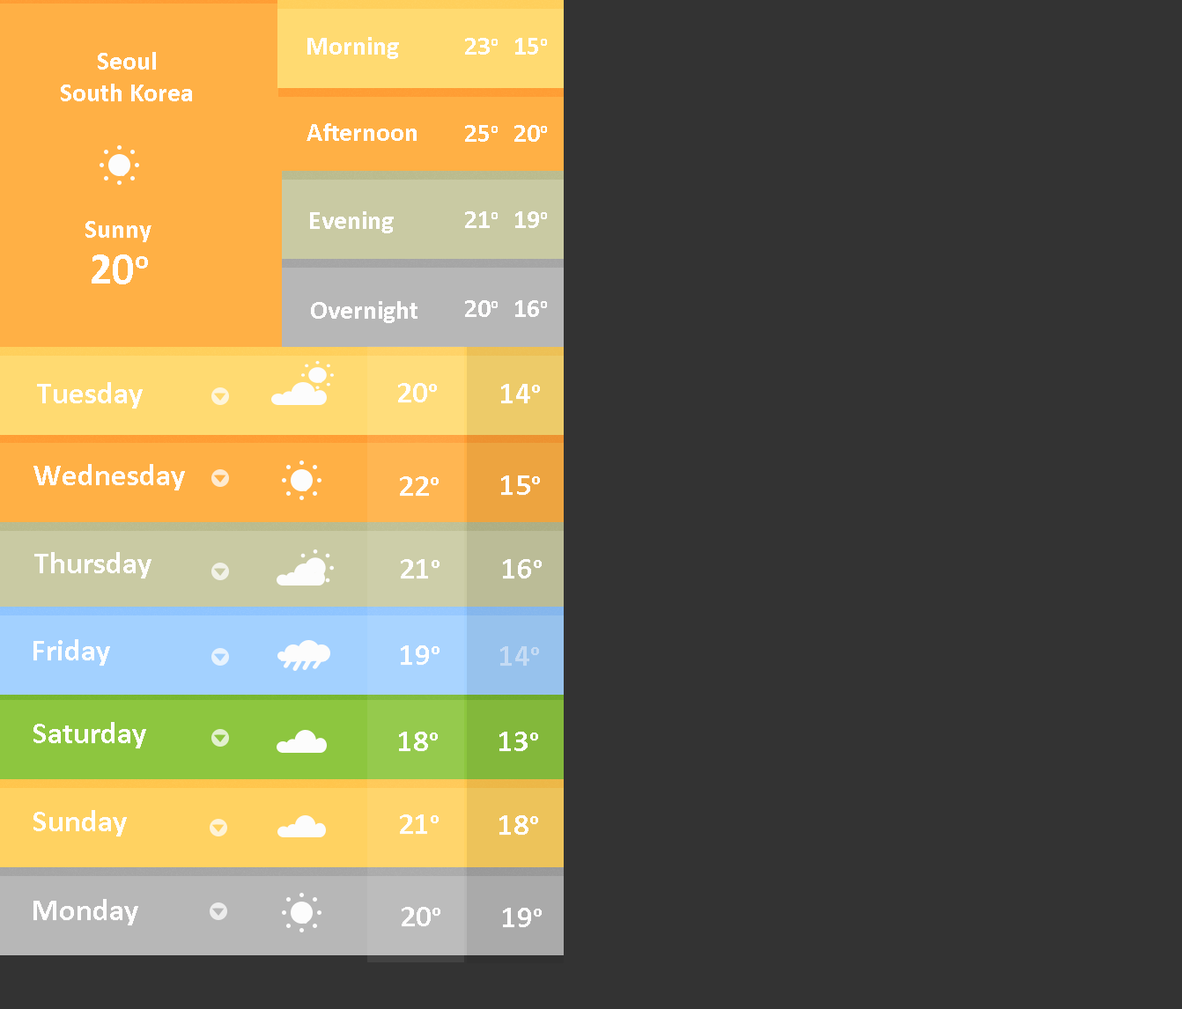
<style>
.page{position:relative;width:1182px;height:1009px;background:#333333}
.page>*{position:absolute;margin:0}
.t1{font:26.4px "Calibri-Bold";color:#fffefe}
.t2{font:44px "Calibri-Bold";color:#fffefe}
.t3{font:30.8px "Calibri-Bold";color:#fffefe}
.t4{font:30.8px "Calibri-Bold";color:#c5dbf4}
</style>
<div class="page">
<p class="t1" style="left:307px;top:37px;width:92px;height:22px">Morning</p>
<p class="t1" style="left:465px;top:38px;width:33px;height:17px">23o</p>
<p class="t1" style="left:515px;top:38px;width:32px;height:17px">15o</p>
<p class="t1" style="left:61px;top:52px;width:131px;height:49px;text-align:center">Seoul<br>South Korea</p>
<p class="t1" style="left:306px;top:123px;width:110px;height:18px">Afternoon</p>
<p class="t1" style="left:465px;top:125px;width:33px;height:17px">25o</p>
<p class="t1" style="left:514px;top:125px;width:33px;height:17px">20o</p>
<p class="t1" style="left:85px;top:221px;width:66px;height:21px">Sunny</p>
<p class="t1" style="left:310px;top:211px;width:84px;height:22px">Evening</p>
<p class="t1" style="left:465px;top:211px;width:33px;height:17px">21o</p>
<p class="t1" style="left:515px;top:211px;width:32px;height:17px">19o</p>
<p class="t2" style="left:92px;top:254px;width:56px;height:30px">20o</p>
<p class="t1" style="left:311px;top:301px;width:106px;height:22px">Overnight</p>
<p class="t1" style="left:465px;top:300px;width:33px;height:17px">20o</p>
<p class="t1" style="left:515px;top:300px;width:32px;height:17px">16o</p>
<p class="t3" style="left:37px;top:382px;width:106px;height:27px">Tuesday</p>
<p class="t3" style="left:398px;top:383px;width:39px;height:19px">20o</p>
<p class="t3" style="left:501px;top:384px;width:39px;height:19px">14o</p>
<p class="t3" style="left:33px;top:464px;width:152px;height:26px">Wednesday</p>
<p class="t3" style="left:400px;top:476px;width:39px;height:20px">22o</p>
<p class="t3" style="left:501px;top:475px;width:39px;height:20px">15o</p>
<p class="t3" style="left:34px;top:552px;width:117px;height:27px">Thursday</p>
<p class="t3" style="left:401px;top:559px;width:38px;height:20px">21o</p>
<p class="t3" style="left:503px;top:559px;width:39px;height:20px">16o</p>
<p class="t3" style="left:33px;top:639px;width:77px;height:27px">Friday</p>
<p class="t3" style="left:401px;top:645px;width:38px;height:20px">19o</p>
<p class="t4" style="left:500px;top:646px;width:39px;height:20px">14o</p>
<p class="t3" style="left:33px;top:722px;width:113px;height:26px">Saturday</p>
<p class="t3" style="left:399px;top:732px;width:39px;height:19px">18o</p>
<p class="t3" style="left:499px;top:732px;width:39px;height:19px">13o</p>
<p class="t3" style="left:33px;top:810px;width:94px;height:27px">Sunday</p>
<p class="t3" style="left:400px;top:814px;width:39px;height:20px">21o</p>
<p class="t3" style="left:499px;top:815px;width:39px;height:20px">18o</p>
<p class="t3" style="left:33px;top:899px;width:105px;height:26px">Monday</p>
<p class="t3" style="left:402px;top:907px;width:38px;height:19px">20o</p>
<p class="t3" style="left:503px;top:908px;width:39px;height:19px">19o</p>
</div>
